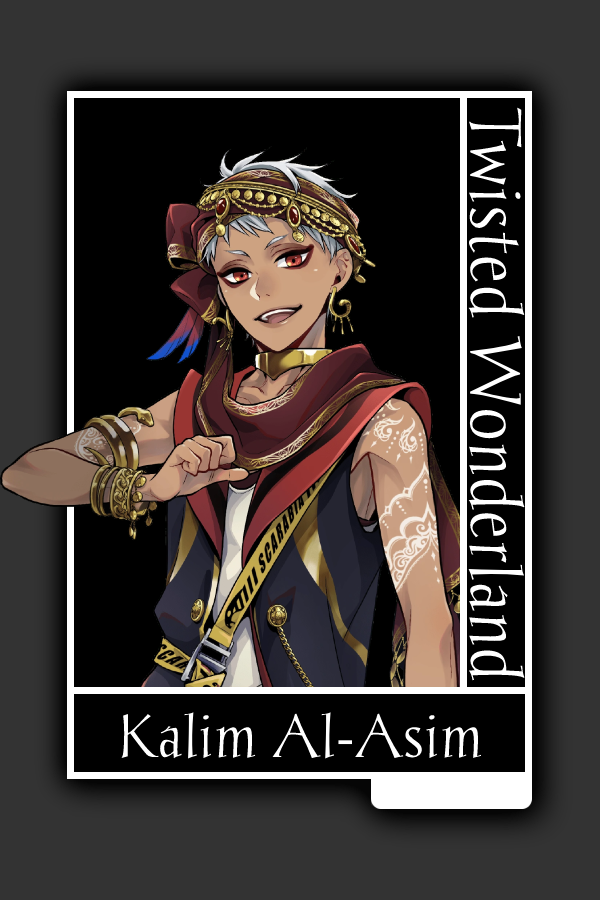
<style>
.page{position:relative;width:600px;height:900px;background:#000000}
.page>*{position:absolute;margin:0}
.t1{font:60px "Chantelli-Antiqua";color:#ffffff}
.t2{font:50px "Chantelli-Antiqua";color:#ffffff}
</style>
<div class="page">
<p class="t1" style="left:468px;top:107px;width:57px;height:574px;rotate:90deg">Twisted Wonderland</p>
<p class="t2" style="left:121px;top:712px;width:361px;height:47px">Kalim Al-Asim</p>
</div>
